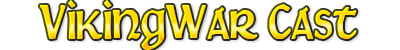
<style>
.page{position:relative;width:400px;height:50px;background:#ffffff}
.page>*{position:absolute;margin:0}
.t1{font:58.6px "Martel";color:#ffea00;scale:0.82 1}
</style>
<div class="page">
<p class="t1" style="left:39px;top:0px;width:318px;height:50px">VikingWar Cast</p>
</div>
